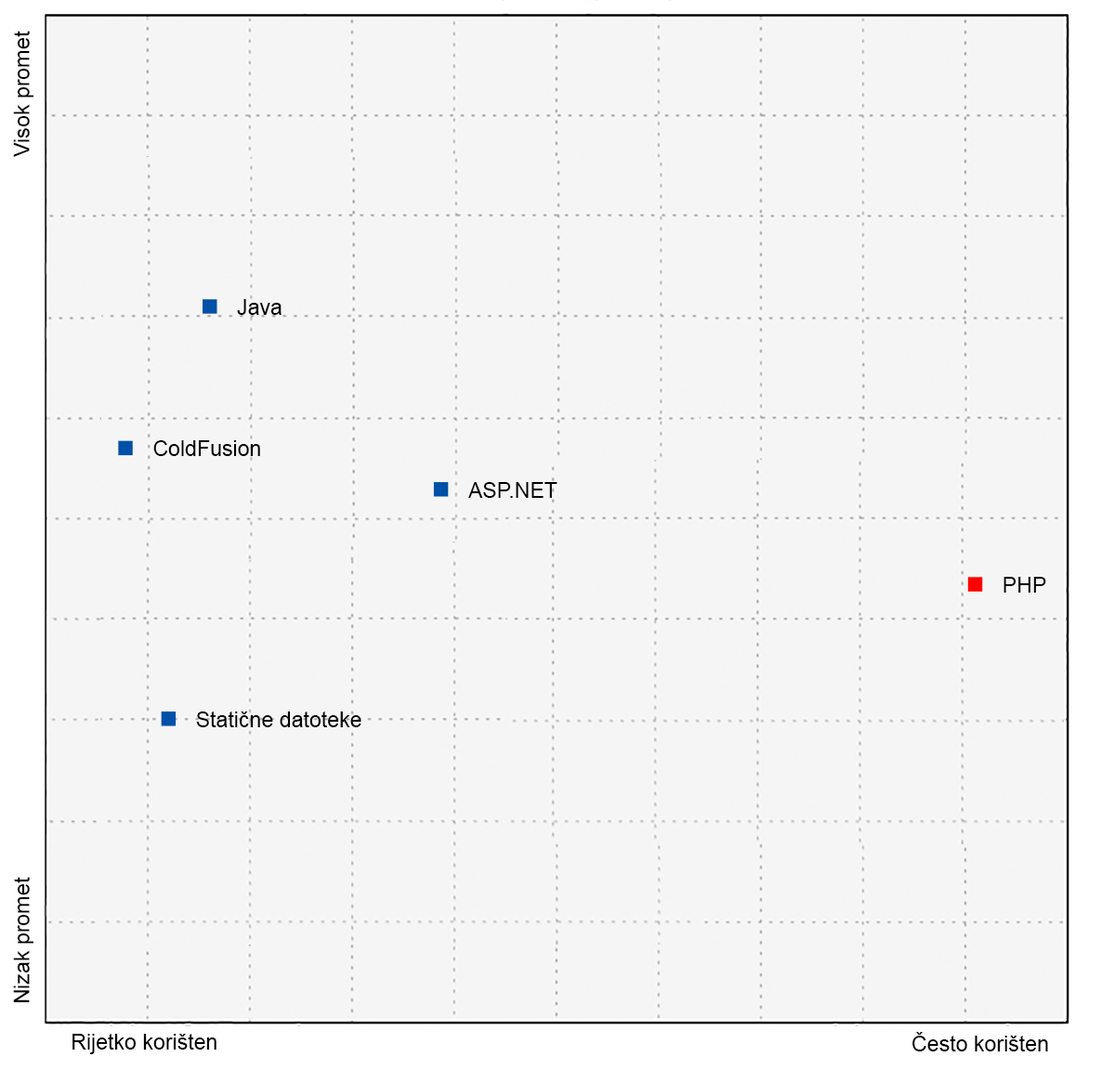
<style>
.page{position:relative;width:1115px;height:1070px;background:#f5f5f5}
.page>*{position:absolute;margin:0}
.t1{font:21.5px "ArialMT";color:#000000}
</style>
<div class="page">
<p class="t1" style="left:13px;top:31px;width:21px;height:126px;rotate:-90deg">Visok promet</p>
<p class="t1" style="left:237px;top:299px;width:44px;height:16px">Java</p>
<p class="t1" style="left:153px;top:440px;width:107px;height:16px">ColdFusion</p>
<p class="t1" style="left:468px;top:482px;width:89px;height:16px">ASP.NET</p>
<p class="t1" style="left:1003px;top:577px;width:43px;height:16px">PHP</p>
<p class="t1" style="left:196px;top:711px;width:165px;height:16px">Statične datoteke</p>
<p class="t1" style="left:13px;top:877px;width:21px;height:126px;rotate:-90deg">Nizak promet</p>
<p class="t1" style="left:72px;top:1034px;width:144px;height:20px">Rijetko korišten</p>
<p class="t1" style="left:912px;top:1032px;width:136px;height:19px">Često korišten</p>
</div>
